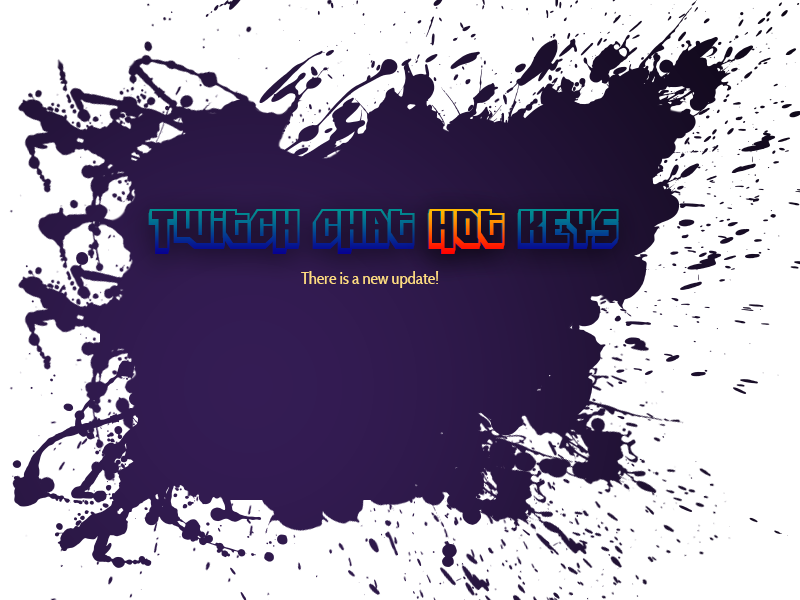
<style>
.page{position:relative;width:800px;height:600px;background:#ffffff}
.page>*{position:absolute;margin:0}
.t1{font:45.8px "DimitriSwank"}
.t2{font:16.7px "CabinCondensed";color:#ffdc82}
</style>
<div class="page">
<p class="t1" style="left:148px;top:209px;width:471px;height:45px">Twitch chat Hot Keys</p>
<p class="t1" style="left:428px;top:209px;width:77px;height:45px">Hot</p>
<p class="t2" style="left:301px;top:271px;width:138px;height:17px">There is a new update!</p>
</div>
